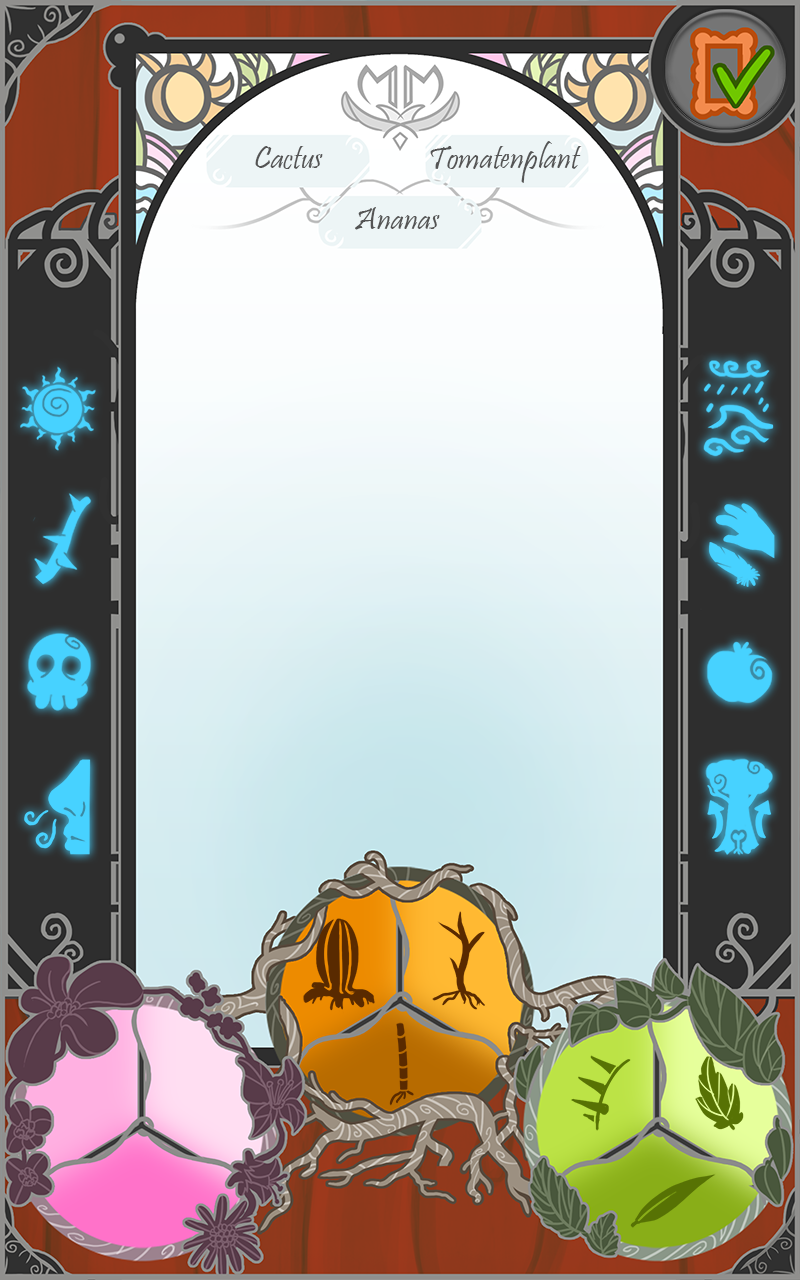
<style>
.page{position:relative;width:800px;height:1280px}
.page>*{position:absolute;margin:0}
.t1{font:33.3px "Pristina-Regular";color:#545454}
</style>
<div class="page">
<p class="t1" style="left:255px;top:146px;width:68px;height:23px">Cactus</p>
<p class="t1" style="left:430px;top:141px;width:152px;height:42px">Tomatenplant</p>
<p class="t1" style="left:355px;top:207px;width:85px;height:23px">Ananas</p>
</div>
